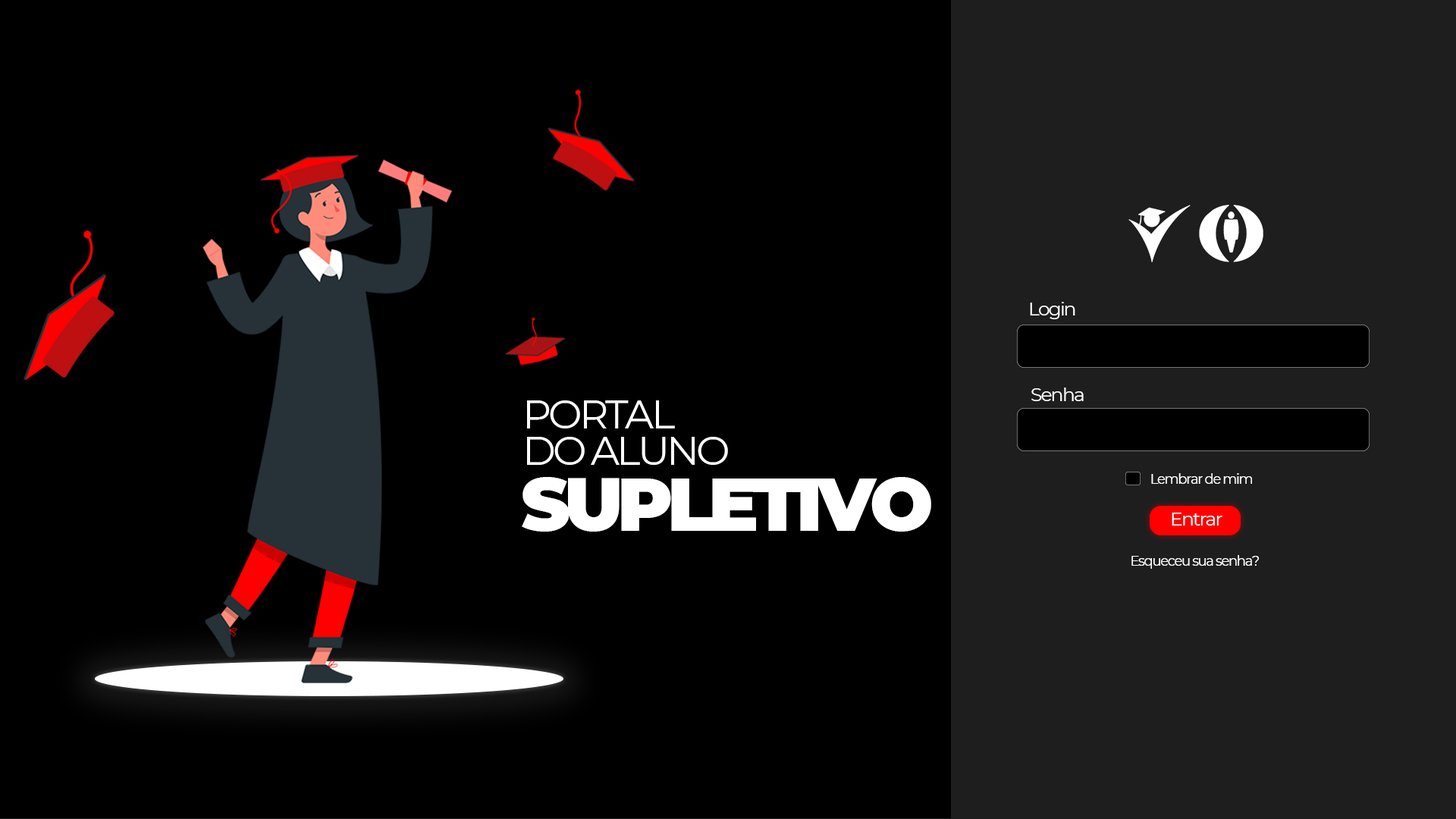
<style>
.page{position:relative;width:1456px;height:819px;background:#000000}
.page>*{position:absolute;margin:0}
.t1{font:19px "Montserrat-Regular";letter-spacing:-0.075em;color:#ffffff}
.t2{font:40.2px "Montserrat-Regular";letter-spacing:-0.075em;color:#ffffff}
.t3{font:13.6px "Montserrat-Regular";letter-spacing:-0.075em;color:#ffffff}
.t4{font:74.8px "Montserrat-Black";letter-spacing:-0.075em;color:#ffffff}
</style>
<div class="page">
<p class="t1" style="left:1030px;top:302px;width:45px;height:17px">Login</p>
<p class="t1" style="left:1031px;top:388px;width:53px;height:13px">Senha</p>
<p class="t2" style="left:527px;top:400px;width:148px;height:28px">PORTAL</p>
<p class="t2" style="left:527px;top:437px;width:201px;height:28px">DO ALUNO</p>
<p class="t3" style="left:1151px;top:473px;width:101px;height:11px">Lembrar de mim</p>
<p class="t4" style="left:522px;top:477px;width:409px;height:55px">SUPLETIVO</p>
<p class="t1" style="left:1172px;top:513px;width:50px;height:13px">Entrar</p>
<p class="t3" style="left:1131px;top:555px;width:128px;height:14px">Esqueceu sua senha?</p>
</div>
